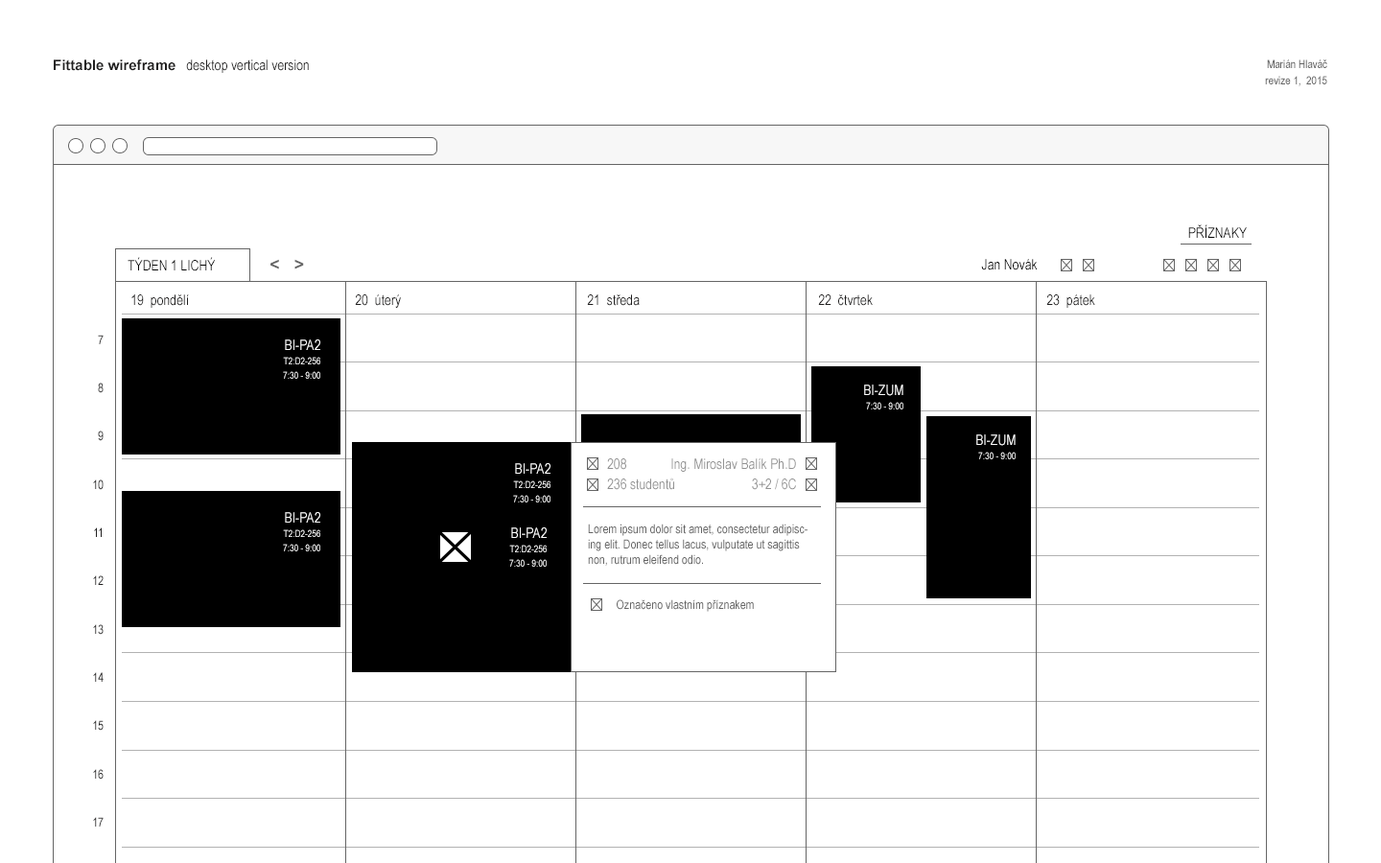
<style>
.page{position:relative;width:1381px;height:863px;background:#ffffff}
.page>*{position:absolute;margin:0}
.t1{font:14.4px "ArialNarrow";color:#201f1f}
.t2{font:14.4px "Arial-BoldMT";color:#201f1f}
.t3{font:11.5px "ArialNarrow";color:#656565}
.t4{font:14.4px "ArialNarrow";color:#000000}
.t5{font:17.3px "Arial-BoldMT";color:#656565}
.t6{font:9.6px "ArialNarrow";color:#ffffff}
.t7{font:14.4px "ArialNarrow";color:#ffffff}
.t8{font:14.4px "ArialNarrow";color:#929292}
.t9{font:12.5px "ArialNarrow";color:#656565}
</style>
<div class="page">
<p class="t1" style="left:54px;top:59px;width:255px;height:14px"><span class="t2">Fittable wireframe </span>  desktop vertical version</p>
<p class="t3" style="left:1265px;top:59px;width:63px;height:27px;text-align:right">Marián Hlaváč <br>revize 1,  2015</p>
<p class="t4" style="left:1188px;top:224px;width:59px;height:14px">PŘÍZNAKY</p>
<p class="t4" style="left:128px;top:257px;width:88px;height:14px">TÝDEN 1 LICHÝ</p>
<p class="t5" style="left:270px;top:259px;width:34px;height:11px">&lt;   &gt;</p>
<p class="t4" style="left:981px;top:259px;width:57px;height:11px">Jan Novák</p>
<p class="t1" style="left:131px;top:294px;width:58px;height:14px">19  pondělí</p>
<p class="t1" style="left:355px;top:294px;width:46px;height:14px">20  úterý</p>
<p class="t1" style="left:587px;top:294px;width:53px;height:12px">21  středa</p>
<p class="t1" style="left:818px;top:294px;width:55px;height:12px">22  čtvrtek</p>
<p class="t1" style="left:1046px;top:294px;width:49px;height:14px">23  pátek</p>
<p class="t6" style="left:283px;top:340px;width:37px;height:39px;text-align:right"><span class="t7">BI-PA2<br></span>T2:D2-256<br>7:30 - 9:00</p>
<p class="t6" style="left:864px;top:385px;width:40px;height:25px;text-align:right"><span class="t7">BI-ZUM<br></span>7:30 - 9:00</p>
<p class="t6" style="left:976px;top:435px;width:40px;height:24px;text-align:right"><span class="t7">BI-ZUM<br></span>7:30 - 9:00</p>
<p class="t8" style="left:607px;top:459px;width:67px;height:31px">208<br>236 studentů</p>
<p class="t8" style="left:671px;top:459px;width:125px;height:31px;text-align:right">Ing. Miroslav Balík Ph.D<br>3+2 / 6C</p>
<p class="t6" style="left:513px;top:463px;width:38px;height:40px;text-align:right"><span class="t7">BI-PA2<br></span>T2:D2-256<br>7:30 - 9:00</p>
<p class="t6" style="left:283px;top:512px;width:37px;height:40px;text-align:right"><span class="t7">BI-PA2<br></span>T2:D2-256<br>7:30 - 9:00</p>
<p class="t6" style="left:509px;top:528px;width:38px;height:39px;text-align:right"><span class="t7">BI-PA2<br></span>T2:D2-256<br>7:30 - 9:00</p>
<p class="t9" style="left:588px;top:524px;width:220px;height:42px">Lorem ipsum dolor sit amet, consectetur adipiscing elit. Donec tellus lacus, vulputate ut sagittis non, rutrum eleifend odio.</p>
<p class="t9" style="left:617px;top:600px;width:137px;height:12px">Označeno vlastním příznakem</p>
</div>
